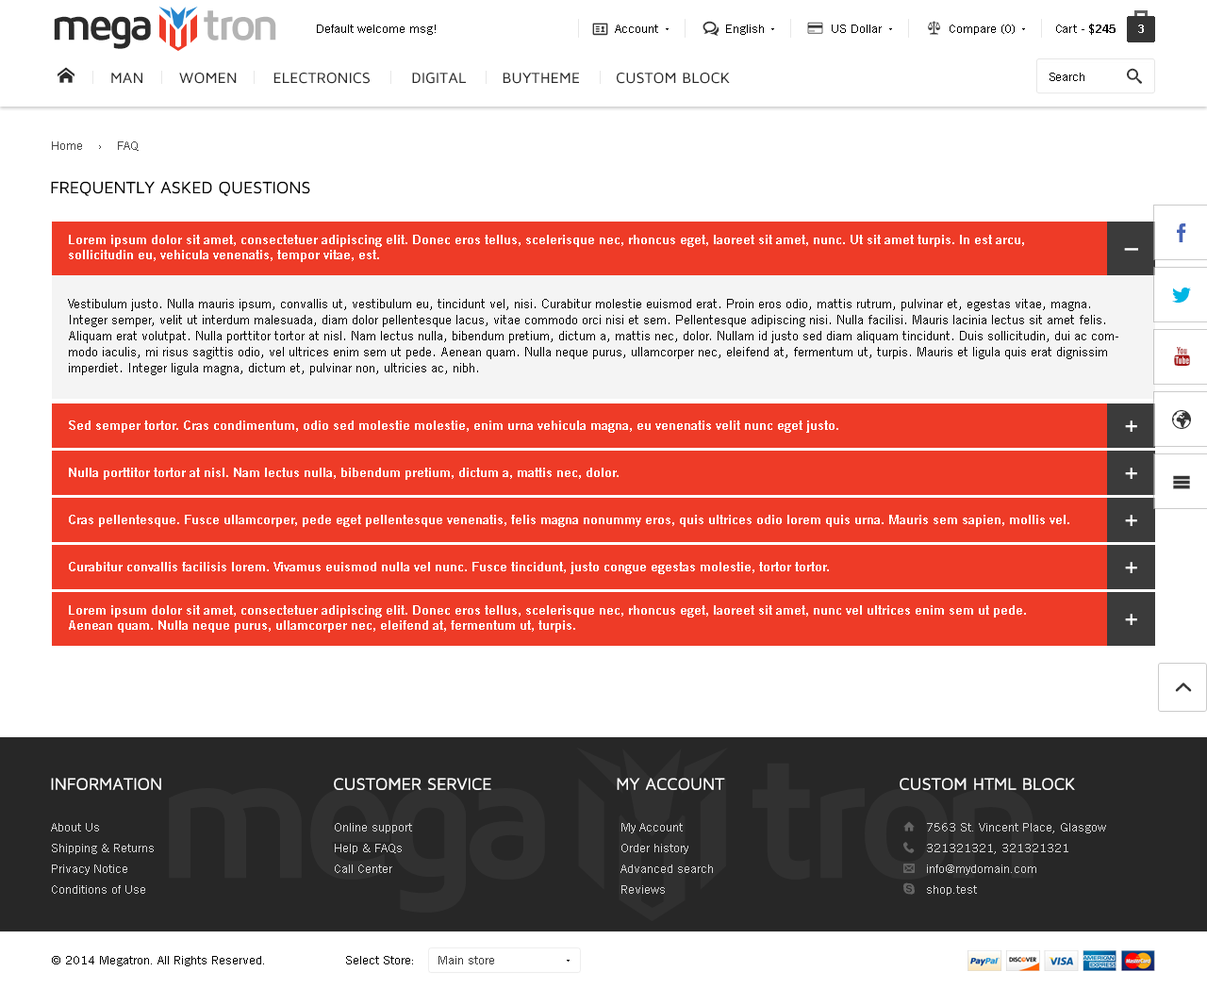
<style>
.page{position:relative;width:1207px;height:988px;background:#ffffff}
.page>*{position:absolute;margin:0}
.t1{font:45.3px "MavenProBold";letter-spacing:-0.1em;color:#2b2b2b}
.t2{font:45.3px "MavenProBold";letter-spacing:-0.1em;color:#b4b4b4}
.t3{font:12.3px "TradeGothicW01-Roman";color:#000000}
.t4{font:12.3px "TradeGothicW01-Bold2";color:#000000}
.t5{font:11.3px "TradeGothicW01-Bold2";color:#ffffff}
.t6{font:12.3px "TradeGothicW01-Roman";color:#494949}
.t7{font:17px "MavenProRegular";color:#000000;text-transform:uppercase}
.t8{font:13.2px/15.1px "TradeGothicW01-Bold2";color:#ffffff}
.t9{font:31.1px "MavenProRegular";color:#ffffff;text-transform:uppercase}
.t10{font:13.2px/16px "TradeGothicW01-Roman";color:#000000}
.t11{font:13.2px "TradeGothicW01-Bold2";color:#ffffff}
.t12{font:17px "MavenProRegular";color:#ffffff;text-transform:uppercase}
.t13{font:12.3px/20.7px "TradeGothicW01-Roman";color:#d9d9d9}
.t14{font:12.3px "TradeGothicW01-Roman";color:#3c3c3c}
</style>
<div class="page">
<p class="t1" style="left:54px;top:10px;width:222px;height:39px">mega     <span class="t2">tron</span></p>
<p class="t3" style="left:317px;top:25px;width:119px;height:10px">Default welcome msg!</p>
<p class="t3" style="left:615px;top:25px;width:43px;height:8px">Account</p>
<p class="t3" style="left:726px;top:25px;width:38px;height:10px">English</p>
<p class="t3" style="left:832px;top:25px;width:50px;height:8px">US Dollar</p>
<p class="t3" style="left:949px;top:25px;width:65px;height:10px">Compare (0)</p>
<p class="t3" style="left:1056px;top:24px;width:59px;height:11px">Cart - <span class="t4">$245</span></p>
<p class="t5" style="left:1138px;top:25px;width:6px;height:8px">3</p>
<p class="t3" style="left:1049px;top:73px;width:35px;height:8px">Search</p>
<p class="t6" style="left:52px;top:141px;width:87px;height:10px">Home    ›    FAQ</p>
<p class="t7" style="left:51px;top:181px;width:259px;height:15px">Frequently Asked Questions</p>
<p class="t8" style="left:69px;top:235px;width:955px;height:27px">Lorem ipsum dolor sit amet, consectetuer adipiscing elit. Donec eros tellus, scelerisque nec, rhoncus eget, laoreet sit amet, nunc. Ut sit amet turpis. In est arcu, sollicitudin eu, vehicula venenatis, tempor vitae, est.</p>
<p class="t9" style="left:1124px;top:248px;width:14px;height:3px">–</p>
<p class="t10" style="left:68px;top:299px;width:1050px;height:76px">Vestibulum justo. Nulla mauris ipsum, convallis ut, vestibulum eu, tincidunt vel, nisi. Curabitur molestie euismod erat. Proin eros odio, mattis rutrum, pulvinar et, egestas vitae, magna. Integer semper, velit ut interdum malesuada, diam dolor pellentesque lacus, vitae commodo orci nisi et sem. Pellentesque adipiscing nisi. Nulla facilisi. Mauris lacinia lectus sit amet felis. Aliquam erat volutpat. Nulla porttitor tortor at nisl. Nam lectus nulla, bibendum pretium, dictum a, mattis nec, dolor. Nullam id justo sed diam aliquam tincidunt. Duis sollicitudin, dui ac commodo iaculis, mi risus sagittis odio, vel ultrices enim sem ut pede. Aenean quam. Nulla neque purus, ullamcorper nec, eleifend at, fermentum ut, turpis. Mauris et ligula quis erat dignissim imperdiet. Integer ligula magna, dictum et, pulvinar non, ultricies ac, nibh.</p>
<p class="t11" style="left:69px;top:421px;width:769px;height:12px">Sed semper tortor. Cras condimentum, odio sed molestie molestie, enim urna vehicula magna, eu venenatis velit nunc eget justo.</p>
<p class="t9" style="left:1125px;top:421px;width:12px;height:11px">+</p>
<p class="t11" style="left:69px;top:468px;width:549px;height:12px">Nulla porttitor tortor at nisl. Nam lectus nulla, bibendum pretium, dictum a, mattis nec, dolor.</p>
<p class="t9" style="left:1125px;top:468px;width:12px;height:11px">+</p>
<p class="t11" style="left:69px;top:515px;width:1000px;height:12px">Cras pellentesque. Fusce ullamcorper, pede eget pellentesque venenatis, felis magna nonummy eros, quis ultrices odio lorem quis urna. Mauris sem sapien, mollis vel.</p>
<p class="t9" style="left:1125px;top:515px;width:12px;height:11px">+</p>
<p class="t11" style="left:69px;top:562px;width:760px;height:12px">Curabitur convallis facilisis lorem. Vivamus euismod nulla vel nunc. Fusce tincidunt, justo congue egestas molestie, tortor tortor.</p>
<p class="t9" style="left:1125px;top:562px;width:12px;height:11px">+</p>
<p class="t8" style="left:69px;top:605px;width:957px;height:28px">Lorem ipsum dolor sit amet, consectetuer adipiscing elit. Donec eros tellus, scelerisque nec, rhoncus eget, laoreet sit amet, nunc vel ultrices enim sem ut pede. Aenean quam. Nulla neque purus, ullamcorper nec, eleifend at, fermentum ut, turpis.</p>
<p class="t9" style="left:1125px;top:614px;width:12px;height:11px">+</p>
<p class="t12" style="left:51px;top:778px;width:110px;height:12px">Information</p>
<p class="t12" style="left:334px;top:778px;width:157px;height:12px">customer service</p>
<p class="t12" style="left:617px;top:778px;width:108px;height:12px">My account</p>
<p class="t12" style="left:899px;top:778px;width:176px;height:12px">CUSTOM HTML BLOCK</p>
<p class="t13" style="left:51px;top:823px;width:103px;height:71px">About Us<br>Shipping &amp; Returns<br>Privacy Notice<br>Conditions of Use</p>
<p class="t13" style="left:335px;top:823px;width:77px;height:50px">Online support<br>Help &amp; FAQs<br>Call Center</p>
<p class="t13" style="left:620px;top:823px;width:93px;height:71px">My Account<br>Order history<br>Advanced search<br>Reviews</p>
<p class="t13" style="left:927px;top:823px;width:179px;height:73px">7563 St. Vincent Place, Glasgow<br>321321321, 321321321<br>info@mydomain.com<br>shop.test</p>
<p class="t3" style="left:52px;top:956px;width:212px;height:10px">© 2014 Megatron. All Rights Reserved.</p>
<p class="t3" style="left:346px;top:956px;width:67px;height:9px">Select Store:</p>
<p class="t14" style="left:438px;top:956px;width:56px;height:9px">Main store</p>
</div>
